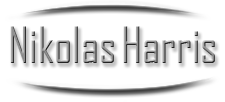
<style>
.page{position:relative;width:225px;height:102px;background:#ffffff}
.page>*{position:absolute;margin:0}
.t1{font:48px "AgencyFB-Reg"}
</style>
<div class="page">
<p class="t1" style="left:10px;top:26px;width:104px;height:37px">Nikolas</p>
<p class="t1" style="left:123px;top:26px;width:92px;height:37px">Harris</p>
</div>
